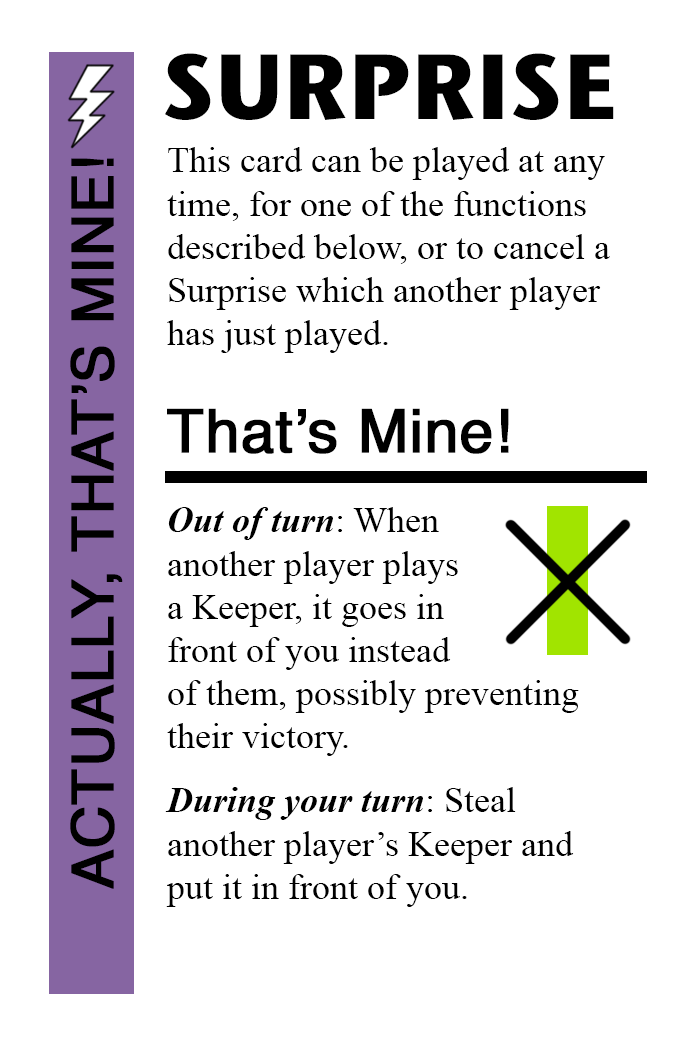
<style>
.page{position:relative;width:700px;height:1042px;background:#ffffff}
.page>*{position:absolute;margin:0}
.t1{font:92px "StoneSansITC-Bold";color:#000000}
.t2{font:36px "TimesNewRomanPSMT";color:#000000}
.t3{font:58px "Helvetica";color:#000000;font-weight:bold}
.t4{font:60px "Helvetica";color:#000000;font-weight:bold}
.t5{font:36px "TimesNewRomanPS-BoldItalicMT";color:#000000}
</style>
<div class="page">
<p class="t1" style="left:165px;top:53px;width:449px;height:67px">SURPRISE</p>
<p class="t2" style="left:167px;top:147px;width:443px;height:206px">This card can be played at any <br>time, for one of the functions<br>described below, or to cancel a<br>Surprise which another player<br>has just played.</p>
<p class="t3" style="left:70px;top:158px;width:53px;height:731px;rotate:-90deg">ACTUALLY, THAT’S MINE!</p>
<p class="t4" style="left:167px;top:408px;width:342px;height:46px">That’s Mine!</p>
<p class="t2" style="left:167px;top:507px;width:412px;height:249px"><span class="t5">Out of turn</span>: When<br>another player plays<br>a Keeper, it goes in<br>front of you instead <br>of them, possibly preventing <br>their victory.</p>
<p class="t2" style="left:165px;top:787px;width:409px;height:120px"><span class="t5">During your turn</span>: Steal<br>another player’s Keeper and<br>put it in front of you.</p>
</div>
